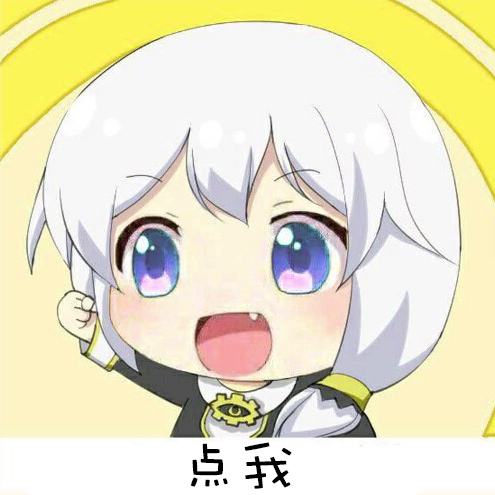
<style>
.page{position:relative;width:495px;height:495px}
.page>*{position:absolute;margin:0}
.t1{font:60px "DFWaWaSC-W5";color:#000000}
</style>
<div class="page">
<p class="t1" style="left:190px;top:442px;width:102px;height:47px">点我</p>
</div>
